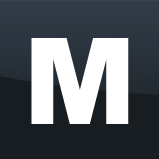
<style>
.page{position:relative;width:159px;height:159px;background:#181d21}
.page>*{position:absolute;margin:0}
.t1{font:120px "Arial-Black";color:#ffffff}
</style>
<div class="page">
<p class="t1" style="left:31px;top:38px;width:98px;height:86px">M</p>
</div>
